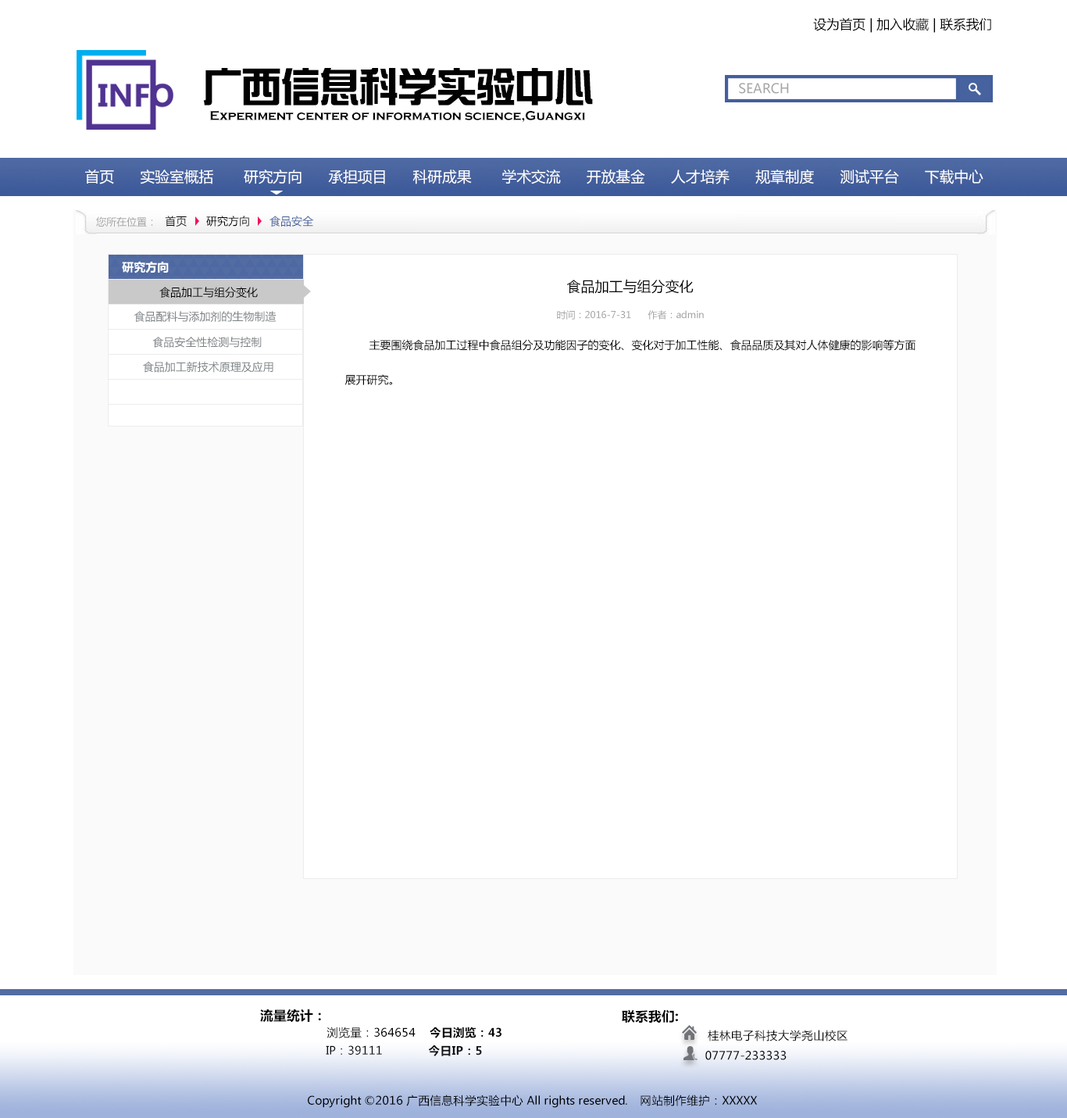
<style>
.page{position:relative;width:1067px;height:1118px;background:#ffffff}
.page>*{position:absolute;margin:0}
.t1{font:13px "MicrosoftYaHei";color:#000000}
.t2{font:39.1px "SingyiEG-Ultra-GB";color:#020202}
.t3{font:13px "MicrosoftYaHei";color:#a6a6a6}
.t4{font:13px "CopperplateGothic-Bold";color:#020202}
.t5{font:14.6px "MicrosoftYaHei";color:#ffffff}
.t6{font:10.2px "MicrosoftYaHei";color:#a6a6a6}
.t7{font:10.9px "MicrosoftYaHei";color:#000000}
.t8{font:10.9px "MicrosoftYaHei";color:#47629f}
.t9{font:11.7px "MicrosoftYaHei-Bold";color:#ffffff}
.t10{font:14.1px "MicrosoftYaHei";color:#000000}
.t11{font:10.9px "MicrosoftYaHei";color:#7c8184}
.t12{font:9.4px "MicrosoftYaHei";color:#a6a6a6}
.t13{font:13px "MicrosoftYaHei-Bold";color:#000000}
.t14{font:11.4px "MicrosoftYaHei";color:#000000}
.t15{font:11.4px "MicrosoftYaHei-Bold";color:#000000}
.t16{font:13px "MicrosoftYaHei-Bold";color:#ffffff}
</style>
<div class="page">
<p class="t1" style="left:813px;top:18px;width:178px;height:15px">设为首页 | 加入收藏 | 联系我们</p>
<p class="t2" style="left:203px;top:68px;width:390px;height:37px">广西信息科学实验中心</p>
<p class="t3" style="left:739px;top:83px;width:50px;height:11px">SEARCH</p>
<p class="t4" style="left:210px;top:110px;width:375px;height:12px">Experiment center of information science,Guangxi</p>
<p class="t5" style="left:85px;top:169px;width:898px;height:15px">首页      实验室概括       研究方向      承担项目      科研成果       学术交流      开放基金      人才培养      规章制度      测试平台      下载中心</p>
<p class="t6" style="left:96px;top:216px;width:57px;height:11px">您所在位置：</p>
<p class="t7" style="left:165px;top:216px;width:149px;height:11px">首页      研究方向      <span class="t8">食品安全</span></p>
<p class="t9" style="left:122px;top:261px;width:47px;height:12px">研究方向</p>
<p class="t10" style="left:566px;top:279px;width:128px;height:15px">食品加工与组分变化</p>
<p class="t7" style="left:159px;top:287px;width:99px;height:11px">食品加工与组分变化</p>
<p class="t11" style="left:134px;top:311px;width:142px;height:11px">食品配料与添加剂的生物制造</p>
<p class="t12" style="left:557px;top:310px;width:147px;height:9px">时间：2016-7-31      作者：admin</p>
<p class="t11" style="left:152px;top:337px;width:110px;height:11px">食品安全性检测与控制</p>
<p class="t7" style="left:369px;top:339px;width:546px;height:12px">主要围绕食品加工过程中食品组分及功能因子的变化、变化对于加工性能、食品品质及其对人体健康的影响等方面</p>
<p class="t11" style="left:143px;top:361px;width:130px;height:12px">食品加工新技术原理及应用</p>
<p class="t7" style="left:344px;top:374px;width:48px;height:11px">展开研究。</p>
<p class="t13" style="left:260px;top:1008px;width:61px;height:14px">流量统计：</p>
<p class="t13" style="left:622px;top:1009px;width:56px;height:13px">联系我们:</p>
<p class="t14" style="left:326px;top:1026px;width:90px;height:12px">浏览量：364654</p>
<p class="t15" style="left:430px;top:1026px;width:71px;height:12px">今日浏览：43</p>
<p class="t14" style="left:708px;top:1029px;width:139px;height:12px">桂林电子科技大学尧山校区</p>
<p class="t14" style="left:326px;top:1045px;width:56px;height:9px"><span class="t16">    </span>IP：39111</p>
<p class="t15" style="left:428px;top:1045px;width:54px;height:11px">今日IP：5</p>
<p class="t14" style="left:705px;top:1050px;width:82px;height:10px">07777-233333</p>
<p class="t14" style="left:308px;top:1094px;width:450px;height:14px">Copyright ©2016 广西信息科学实验中心 All rights reserved.　网站制作维护：XXXXX</p>
</div>
